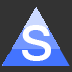
<style>
.page{position:relative;width:72px;height:72px;background:#333333}
.page>*{position:absolute;margin:0}
.t1{font:66px "HelveticaNeue";color:#ffffff}
</style>
<div class="page">
<p class="t1" style="left:22px;top:25px;width:29px;height:36px">s</p>
</div>
